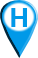
<style>
.page{position:relative;width:38px;height:58px;background:#ffffff}
.page>*{position:absolute;margin:0}
.t1{font:26.5px "HelveticaNeue-Bold";color:#0099e8}
</style>
<div class="page">
<p class="t1" style="left:11px;top:8px;width:16px;height:19px">H</p>
</div>
